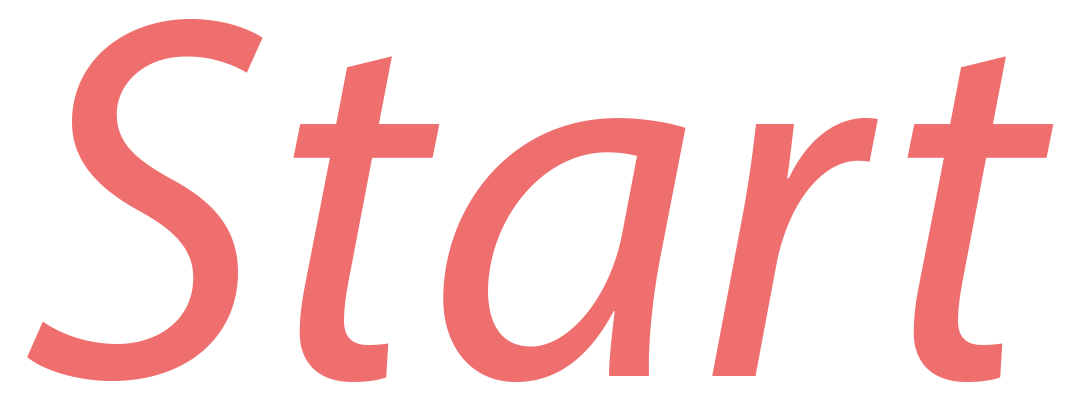
<style>
.page{position:relative;width:1080px;height:400px;background:#ffffff}
.page>*{position:absolute;margin:0}
.t1{font:520.8px "MyriadPro-It";color:#ef6e6e}
</style>
<div class="page">
<p class="t1" style="left:27px;top:19px;width:1027px;height:364px">Start</p>
</div>
